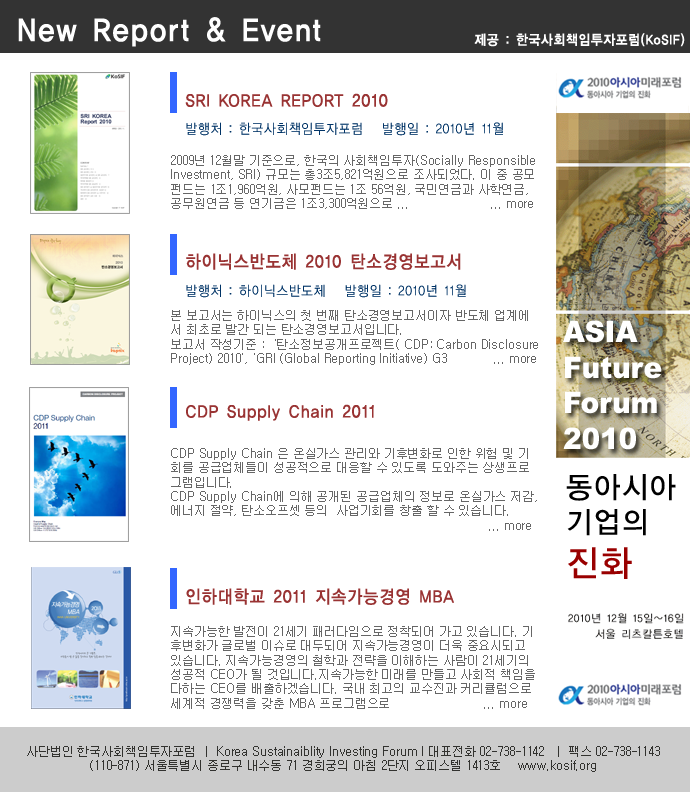
<style>
.page{position:relative;width:690px;height:792px;background:#ffffff}
.page>*{position:absolute;margin:0}
.t1{font:33.1px "YDIYGO140-KSCpc-EUC-H";letter-spacing:-0.01em;color:#ffffff;scale:0.9 1}
.t2{font:14px "YDIYGO140-KSCpc-EUC-H";letter-spacing:-0.01em;color:#ffffff;scale:0.9 1}
.t3{font:18px "YDIYGO130-KSCpc-EUC-H";letter-spacing:-0.01em;color:#993333;scale:0.9 1}
.t4{font:14px "YDIYGO120-KSCpc-EUC-H";letter-spacing:-0.01em;color:#003366;scale:0.9 1}
.t5{font:12px "Gulim";letter-spacing:-0.01em;color:#666666}
.t6{font:29.7px "Arial-Black";letter-spacing:-0.01em;color:#ffffff;scale:0.95 1}
.t7{font:29.7px "YDIYGO130-KSCpc-EUC-H";letter-spacing:-0.01em;color:#000000;scale:0.95 1}
.t8{font:29.7px "YDIYGO130-KSCpc-EUC-H";letter-spacing:-0.01em;color:#666666;scale:0.95 1}
.t9{font:36px "YDIYGO130-KSCpc-EUC-H";letter-spacing:-0.01em;color:#990000;scale:0.95 1}
</style>
<div class="page">
<p class="t1" style="left:18px;top:17px;width:303px;height:30px">New Report &amp; Event</p>
<p class="t2" style="left:474px;top:33px;width:211px;height:14px">제공 : 한국사회책임투자포럼(KoSIF)</p>
<p class="t3" style="left:185px;top:93px;width:203px;height:14px">SRI KOREA REPORT 2010</p>
<p class="t4" style="left:186px;top:122px;width:317px;height:14px">발행처 : 한국사회책임투자포럼   발행일 : 2010년 11월</p>
<p class="t5" style="left:171px;top:155px;width:364px;height:54px">2009년 12월말 기준으로, 한국의 사회책임투자(Socially Responsible<br>Investment, SRI) 규모는 총3조5,821억원으로 조사되었다. 이 중 공모펀드는 1조1,960억원, 사모펀드는 1조 56억원, 국민연금과 사학연금, 공무원연금 등 연기금은 1조3,300억원으로 ...                     ... more</p>
<p class="t3" style="left:186px;top:253px;width:275px;height:17px">하이닉스반도체 2010 탄소경영보고서</p>
<p class="t4" style="left:186px;top:284px;width:280px;height:14px">발행처 : 하이닉스반도체   발행일 : 2010년 11월</p>
<p class="t5" style="left:171px;top:310px;width:367px;height:55px">본 보고서는 하이닉스의 첫 번째 탄소경영보고서이자 반도체 업계에서 최초로 발간 되는 탄소경영보고서입니다.<br>보고서 작성기준 :  '탄소정보공개프로젝트( CDP: Carbon Disclosure Project) 2010', 'GRI (Global Reporting Initiative) G3            ... more</p>
<p class="t6" style="left:563px;top:320px;width:99px;height:130px">ASIA<br>Future<br>Forum<br>2010</p>
<p class="t3" style="left:186px;top:404px;width:188px;height:17px">CDP Supply Chain 2011</p>
<p class="t5" style="left:171px;top:448px;width:366px;height:83px">CDP Supply Chain 은 온실가스 관리와 기후변화로 인한 위험 및 기회를 공급업체들이 성공적으로 대응할 수 있도록 도와주는 상생프로그램입니다. <br>CDP Supply Chain에 의해 공개된 공급업체의 정보로 온실가스 저감, 에너지 절약, 탄소오프셋 등의  사업기회를 창출 할 수 있습니다.                                                                        <br>                                                                                  ... more</p>
<p class="t7" style="left:566px;top:474px;width:110px;height:105px"><span class="t8"><br></span>동아시아<br>기업의 <br><span class="t9">진화</span></p>
<p class="t3" style="left:186px;top:588px;width:268px;height:17px">인하대학교 2011 지속가능경영 MBA</p>
<p class="t5" style="left:171px;top:626px;width:364px;height:83px">지속가능한 발전이 21세기 패러다임으로 정착되어 가고 있습니다. 기후변화가 글로벌 이슈로 대두되어 지속가능경영이 더욱 중요시되고 있습니다. 지속가능경영의 철학과 전략을 이해하는 사람이 21세기의 성공적 CEO가 될 것입니다.지속가능한 미래를 만들고 사회적 책임을 다하는 CEO를 배출하겠습니다. 국내 최고의 교수진과 커리큘럼으로 세계적 경쟁력을 갖춘 MBA 프로그램으로                        ... more</p>
</div>
